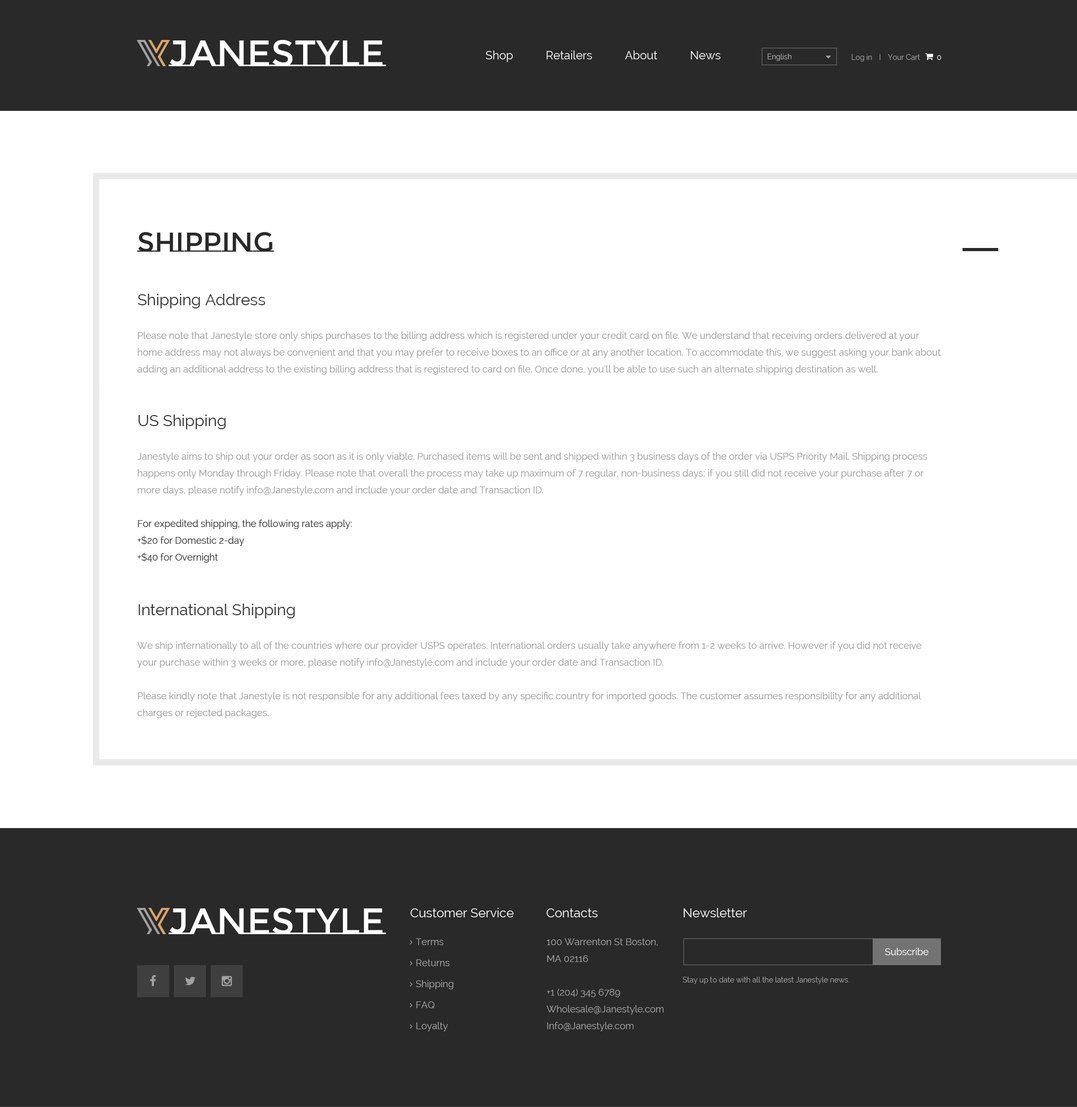
<style>
.page{position:relative;width:1077px;height:1107px;background:#ffffff}
.page>*{position:absolute;margin:0}
.t1{font:36.8px "MontserratSubrayada-Regular";color:#ffffff}
.t2{font:11.6px "Raleway";color:#ffffff}
.t3{font:7.4px "Raleway";color:#b3b3b3}
.t4{font:7.4px "Raleway";color:#a1a1a1}
.t5{font:7.4px "Raleway";color:#ffffff}
.t6{font:27.3px "MontserratSubrayada-Regular";color:#292929}
.t7{font:9.5px/16.8px "Raleway";color:#a1a1a1}
.t8{font:15.8px/16.8px "Raleway";color:#373737}
.t9{font:9.5px/16.8px "Raleway";color:#3c3c3c}
.t10{font:12.6px "Raleway";color:#ffffff}
.t11{font:9.5px/21px "Raleway";color:#a1a1a1}
.t12{font:9.5px "Raleway";color:#fffefe}
</style>
<div class="page">
<p class="t1" style="left:169px;top:40px;width:217px;height:26px">Janestyle</p>
<p class="t2" style="left:485px;top:50px;width:236px;height:12px">Shop           Retailers           About           News</p>
<p class="t3" style="left:768px;top:54px;width:24px;height:7px">English</p>
<p class="t4" style="left:852px;top:54px;width:20px;height:7px">Log in</p>
<p class="t4" style="left:888px;top:54px;width:33px;height:6px">Your Cart</p>
<p class="t5" style="left:937px;top:55px;width:5px;height:5px">0</p>
<p class="t6" style="left:137px;top:232px;width:137px;height:20px">Shipping</p>
<p class="t7" style="left:137px;top:294px;width:804px;height:81px"><span class="t8">Shipping Address<br></span><br>Please note that Janestyle store only ships purchases to the billing address which is registered under your credit card on file. We understand that receiving orders delivered at your home address may not always be convenient and that you may prefer to receive boxes to an office or at any another location. To accommodate this, we suggest asking your bank about adding an additional address to the existing billing address that is registered to card on file. Once done, you’ll be able to use such an alternate shipping destination as well.</p>
<p class="t7" style="left:137px;top:415px;width:790px;height:148px"><span class="t8">US Shipping<br></span><br>Janestyle aims to ship out your order as soon as it is only viable. Purchased items will be sent and shipped within 3 business days of the order via USPS Priority Mail. Shipping process happens only Monday through Friday. Please note that overall the process may take up maximum of 7 regular, non-business days; if you still did not receive your purchase after 7 or more days, please notify info@Janestyle.com and include your order date and Transaction ID.<br><br><span class="t9">For expedited shipping, the following rates apply:<br>+$20 for Domestic 2-day<br>+$40 for Overnight</span></p>
<p class="t7" style="left:137px;top:604px;width:785px;height:114px"><span class="t8">International Shipping<br></span><br>We ship internationally to all of the countries where our provider USPS operates. International orders usually take anywhere from 1-2 weeks to arrive. However if you did not receive your purchase within 3 weeks or more, please notify info@Janestyle.com and include your order date and Transaction ID.<br><br>Please kindly note that Janestyle is not responsible for any additional fees taxed by any specific country for imported goods. The customer assumes responsibility for any additional charges or rejected packages.</p>
<p class="t1" style="left:169px;top:908px;width:217px;height:26px">Janestyle</p>
<p class="t10" style="left:410px;top:908px;width:104px;height:9px">Customer Service</p>
<p class="t10" style="left:546px;top:908px;width:52px;height:9px">Contacts</p>
<p class="t10" style="left:684px;top:908px;width:63px;height:9px">Newsletter</p>
<p class="t11" style="left:416px;top:938px;width:37px;height:93px">Terms<br>Returns<br>Shipping<br>FAQ<br>Loyalty</p>
<p class="t7" style="left:546px;top:938px;width:118px;height:93px">100 Warrenton St Boston, <br>MA 02116<br><br>+1 (204) 345 6789<br>Wholesale@Janestyle.com<br>Info@Janestyle.com</p>
<p class="t12" style="left:885px;top:948px;width:44px;height:7px">Subscribe</p>
<p class="t4" style="left:683px;top:977px;width:167px;height:7px">Stay up to date with all the latest Janestyle news.</p>
</div>
